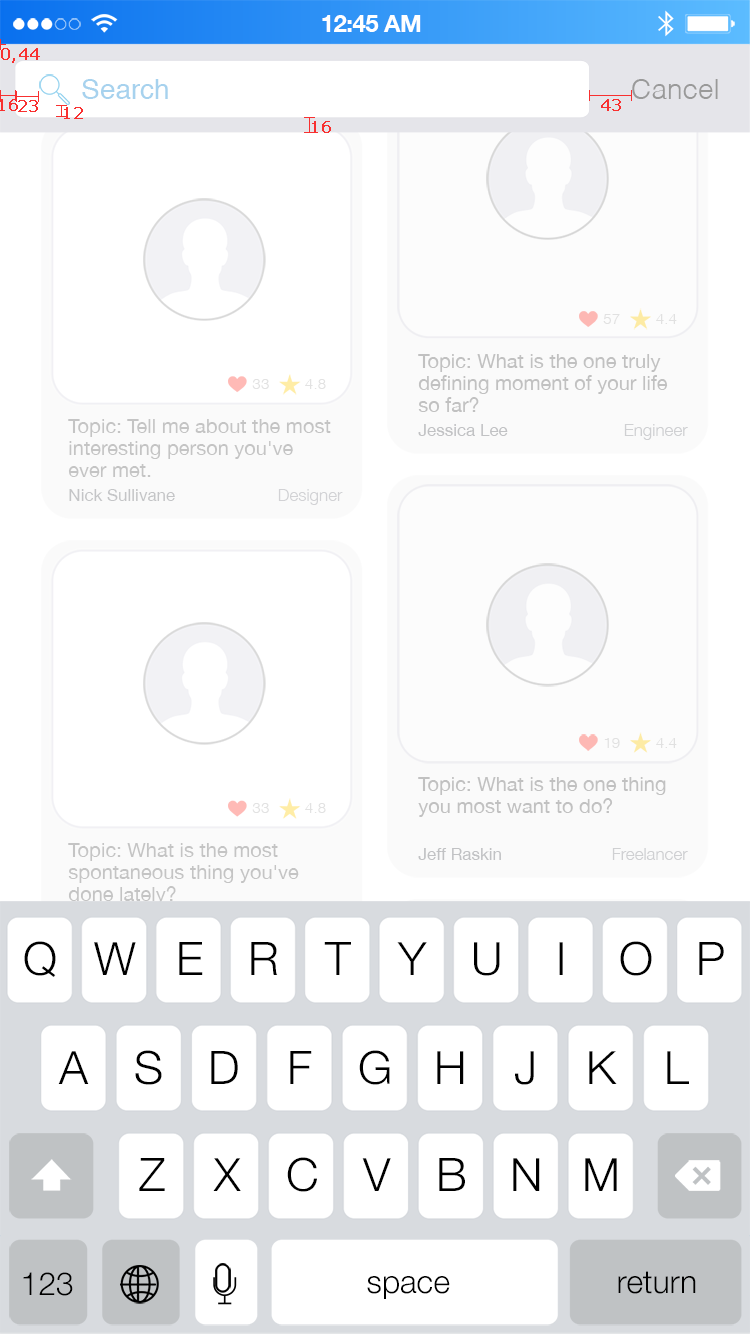
<style>
.page{position:relative;width:750px;height:1334px;background:#ffffff}
.page>*{position:absolute;margin:0}
.t1{font:23.8px "HelveticaNeue-Bold";letter-spacing:-0.02em;color:#ffffff}
.t2{font:16px "Verdana";color:#f83030;font-weight:bold}
.t3{font:28px "Helvetica";color:#a7d2ee}
.t4{font:28px "Helvetica-Light";color:#999999}
.t5{font:15.5px "Helvetica-Light";color:#e1e1e1}
.t6{font:20px/22px "HelveticaNeue";color:#c1c1c1}
.t7{font:15.5px "Helvetica-Light";color:#e2e2e2}
.t8{font:20px/22px "HelveticaNeue";color:#c4c4c4}
.t9{font:17px "HelveticaNeue";color:#c1c2c4}
.t10{font:17px "HelveticaNeue-Light";color:#cfd0d2}
.t11{font:17px "HelveticaNeue";color:#c4c5c7}
.t12{font:17px "HelveticaNeue-Light";color:#d2d2d5}
.t13{font:46px "HelveticaNeue-Light";color:#000000}
.t14{font:32px "HelveticaNeue-Light";color:#000000}
</style>
<div class="page">
<p class="t1" style="left:322px;top:15px;width:99px;height:17px">12:45 AM</p>
<p class="t2" style="left:1px;top:48px;width:39px;height:15px">0,44</p>
<p class="t3" style="left:82px;top:79px;width:86px;height:20px">Search</p>
<p class="t4" style="left:632px;top:79px;width:86px;height:20px">Cancel</p>
<p class="t2" style="left:0px;top:99px;width:18px;height:12px">16</p>
<p class="t2" style="left:18px;top:100px;width:20px;height:12px">23</p>
<p class="t2" style="left:601px;top:99px;width:20px;height:12px">43</p>
<p class="t2" style="left:64px;top:107px;width:19px;height:12px">12</p>
<p class="t2" style="left:312px;top:121px;width:19px;height:12px">16</p>
<p class="t5" style="left:603px;top:314px;width:17px;height:10px">57</p>
<p class="t5" style="left:656px;top:314px;width:21px;height:10px">4.4</p>
<p class="t6" style="left:418px;top:354px;width:250px;height:58px">Topic: What is the one truly <br>defining moment of your life <br>so far?</p>
<p class="t7" style="left:252px;top:379px;width:17px;height:10px">33</p>
<p class="t7" style="left:305px;top:379px;width:21px;height:10px">4.8</p>
<p class="t8" style="left:68px;top:419px;width:263px;height:58px">Topic: Tell me about the most <br>interesting person you've <br>ever met.</p>
<p class="t9" style="left:418px;top:424px;width:90px;height:12px">Jessica Lee</p>
<p class="t10" style="left:624px;top:424px;width:64px;height:16px">Engineer</p>
<p class="t11" style="left:69px;top:489px;width:106px;height:12px">Nick Sullivane</p>
<p class="t12" style="left:278px;top:489px;width:65px;height:16px">Designer</p>
<p class="t5" style="left:604px;top:738px;width:16px;height:10px">19</p>
<p class="t5" style="left:656px;top:738px;width:21px;height:10px">4.4</p>
<p class="t6" style="left:418px;top:777px;width:248px;height:40px">Topic: What is the one thing <br>you most want to do?</p>
<p class="t7" style="left:252px;top:803px;width:17px;height:10px">33</p>
<p class="t7" style="left:305px;top:803px;width:21px;height:10px">4.8</p>
<p class="t8" style="left:68px;top:843px;width:231px;height:62px">Topic: What is the most <br>spontaneous thing you've <br>done lately?</p>
<p class="t9" style="left:418px;top:848px;width:83px;height:12px">Jeff Raskin</p>
<p class="t10" style="left:612px;top:848px;width:76px;height:12px">Freelancer</p>
<p class="t13" style="left:24px;top:941px;width:32px;height:36px">Q</p>
<p class="t13" style="left:94px;top:942px;width:42px;height:33px">W</p>
<p class="t13" style="left:179px;top:942px;width:24px;height:33px">E</p>
<p class="t13" style="left:251px;top:942px;width:27px;height:33px">R</p>
<p class="t13" style="left:324px;top:942px;width:27px;height:33px">T</p>
<p class="t13" style="left:397px;top:942px;width:30px;height:33px">Y</p>
<p class="t13" style="left:474px;top:942px;width:26px;height:34px">U</p>
<p class="t13" style="left:559px;top:942px;width:4px;height:33px">I</p>
<p class="t13" style="left:620px;top:941px;width:32px;height:35px">O</p>
<p class="t13" style="left:699px;top:942px;width:25px;height:33px">P</p>
<p class="t13" style="left:58px;top:1051px;width:31px;height:33px">A</p>
<p class="t13" style="left:135px;top:1050px;width:27px;height:35px">S</p>
<p class="t13" style="left:211px;top:1051px;width:27px;height:33px">D</p>
<p class="t13" style="left:290px;top:1051px;width:22px;height:33px">F</p>
<p class="t13" style="left:359px;top:1050px;width:31px;height:35px">G</p>
<p class="t13" style="left:437px;top:1051px;width:27px;height:33px">H</p>
<p class="t13" style="left:515px;top:1051px;width:19px;height:34px">J</p>
<p class="t13" style="left:589px;top:1051px;width:28px;height:33px">K</p>
<p class="t13" style="left:667px;top:1051px;width:22px;height:33px">L</p>
<p class="t13" style="left:139px;top:1158px;width:26px;height:33px">Z</p>
<p class="t13" style="left:213px;top:1158px;width:28px;height:33px">X</p>
<p class="t13" style="left:287px;top:1157px;width:30px;height:35px">C</p>
<p class="t13" style="left:362px;top:1158px;width:29px;height:33px">V</p>
<p class="t13" style="left:439px;top:1158px;width:26px;height:33px">B</p>
<p class="t13" style="left:513px;top:1158px;width:27px;height:33px">N</p>
<p class="t13" style="left:585px;top:1158px;width:32px;height:33px">M</p>
<p class="t14" style="left:23px;top:1272px;width:50px;height:24px">123</p>
<p class="t14" style="left:367px;top:1276px;width:83px;height:23px">space</p>
<p class="t14" style="left:618px;top:1271px;width:78px;height:23px">return</p>
</div>
